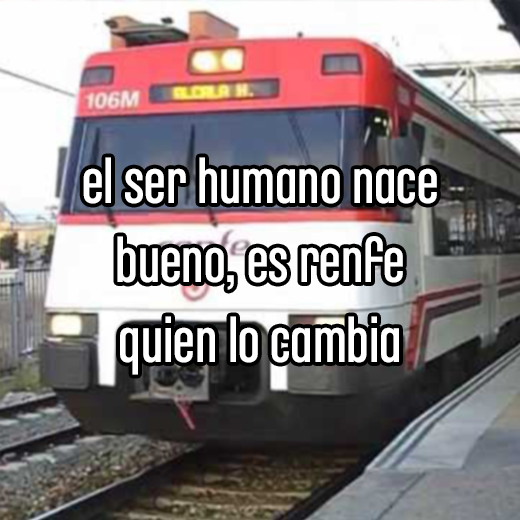
<style>
.page{position:relative;width:520px;height:520px}
.page>*{position:absolute;margin:0}
.t1{font:65.7px "ChaletComprime-CologneEighty";color:#ffffff}
</style>
<div class="page">
<p class="t1" style="left:83px;top:157px;width:354px;height:218px;text-align:center">el ser humano nace<br>bueno, es renfe<br>quien lo cambia</p>
</div>
